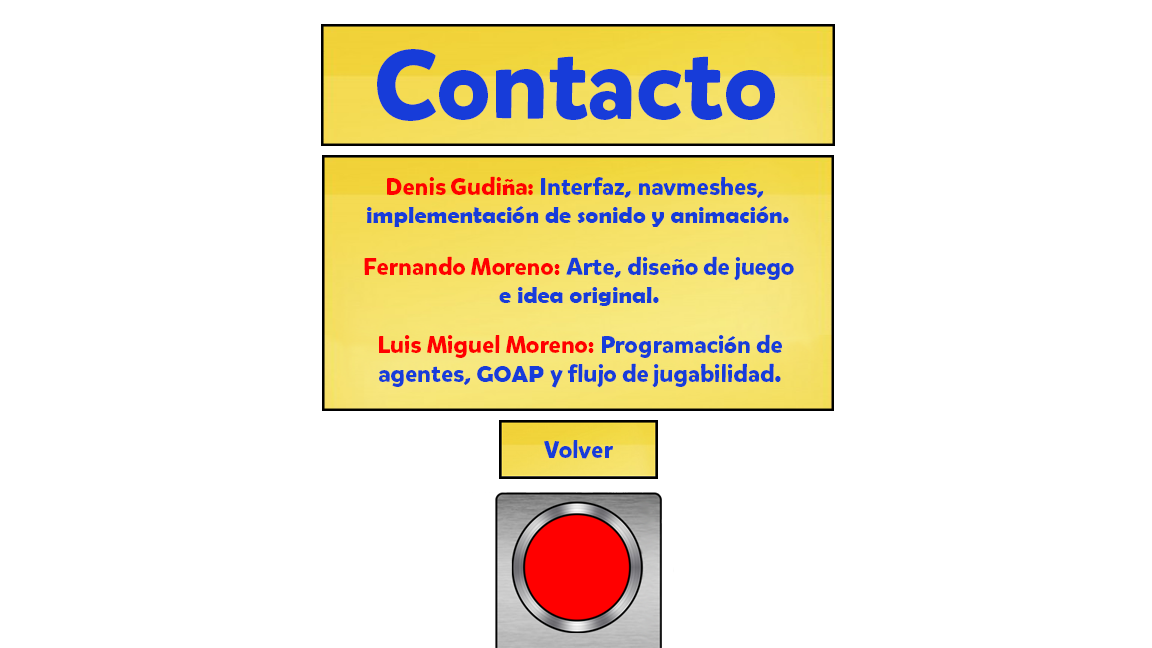
<style>
.page{position:relative;width:1152px;height:648px;background:#ffffff}
.page>*{position:absolute;margin:0}
.t1{font:98px "MikadoBoldDEMO";color:#173cd9}
.t2{font:24px "BerlinSansFBDemi-Bold";color:#173cd9}
.t3{font:24px "MikadoBoldDEMO";color:#ff0000}
.t4{font:24px "BerlinSansFBDemi-Bold";color:#ff0000}
.t5{font:24px "MikadoBoldDEMO";color:#173cd9}
</style>
<div class="page">
<p class="t1" style="left:377px;top:49px;width:398px;height:72px">Contacto</p>
<p class="t2" style="left:367px;top:176px;width:422px;height:51px;text-align:center"><span class="t3">Denis Gudi</span><span class="t4">ñ</span><span class="t3">a</span><span class="t4">: </span><span class="t5">Interfaz</span>, <span class="t5">navmeshes</span>, <br>implementación de sonido y animación.</p>
<p class="t2" style="left:364px;top:256px;width:430px;height:50px;text-align:center"><span class="t3">Fernando Moreno</span><span class="t4">: </span><span class="t5">Arte</span>, <span class="t5">dise</span>ñ<span class="t5">o de juego<br></span>e idea original.</p>
<p class="t5" style="left:379px;top:334px;width:403px;height:54px;text-align:center"><span class="t3">Luis Miguel Moreno</span><span class="t4">: </span>Programaci<span class="t2">ó</span>n de<br>agentes<span class="t2">, GOAP </span>y flujo de jugabilidad<span class="t2">.</span></p>
<p class="t5" style="left:544px;top:440px;width:69px;height:19px">Volver</p>
</div>
